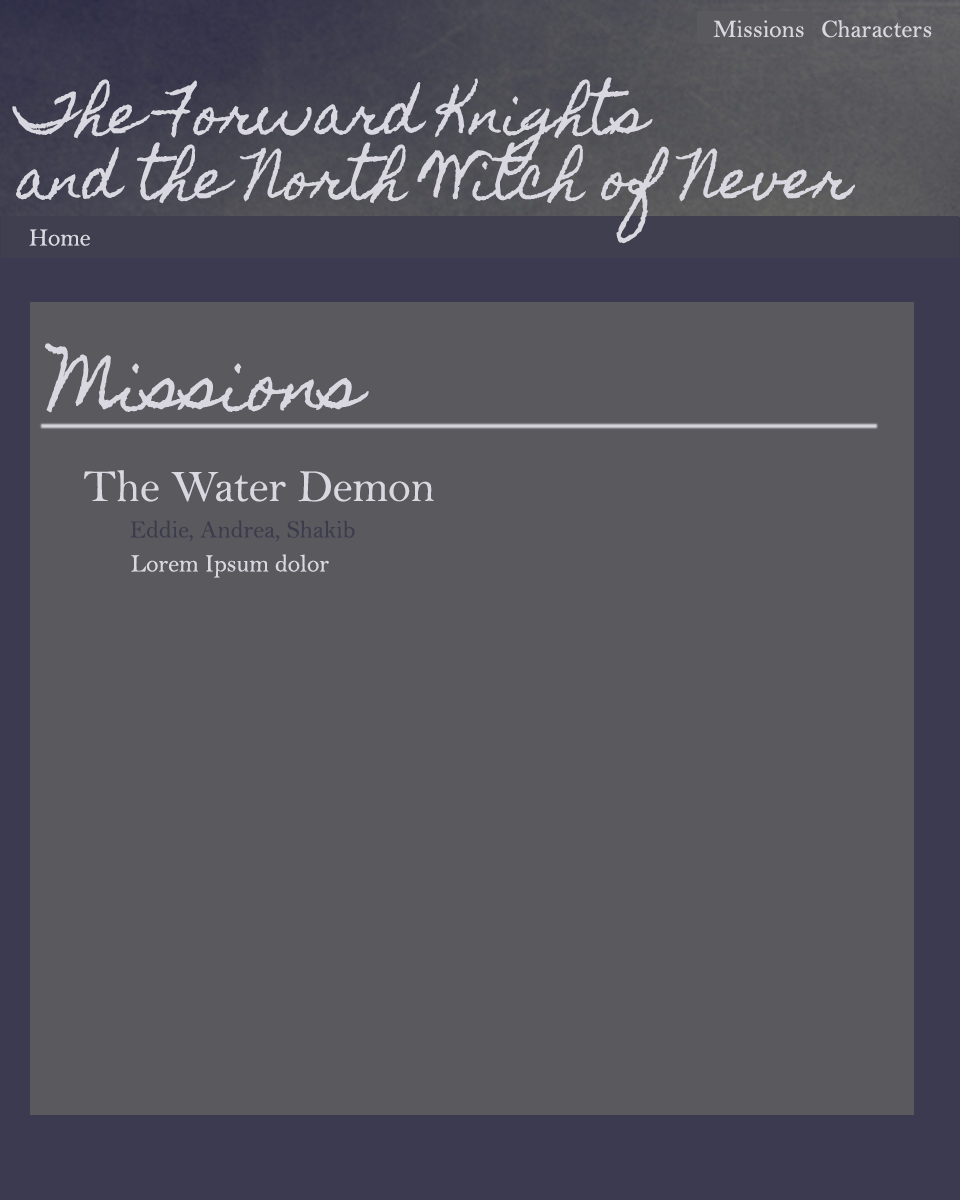
<style>
.page{position:relative;width:960px;height:1200px;background:#5a595e}
.page>*{position:absolute;margin:0}
.t1{font:25px "BellMT";color:#d9d7df}
.t2{font:54.2px "HomemadeApple-Regular";color:#d9d7df}
.t3{font:66.7px "HomemadeApple-Regular";color:#d9d7df}
.t4{font:45.8px "BellMT";color:#d9d7df}
.t5{font:25px "BellMT";color:#3d3c4c}
</style>
<div class="page">
<p class="t1" style="left:713px;top:20px;width:91px;height:18px">Missions</p>
<p class="t1" style="left:822px;top:20px;width:110px;height:18px">Characters</p>
<p class="t2" style="left:12px;top:77px;width:843px;height:167px">The Forward Knights <br>and the North Witch of Never</p>
<p class="t1" style="left:29px;top:229px;width:61px;height:17px">Home</p>
<p class="t3" style="left:45px;top:343px;width:324px;height:70px">Missions</p>
<p class="t4" style="left:84px;top:470px;width:350px;height:32px">The Water Demon</p>
<p class="t5" style="left:130px;top:520px;width:225px;height:22px">Eddie, Andrea, Shakib</p>
<p class="t1" style="left:131px;top:554px;width:198px;height:24px">Lorem Ipsum dolor</p>
</div>
